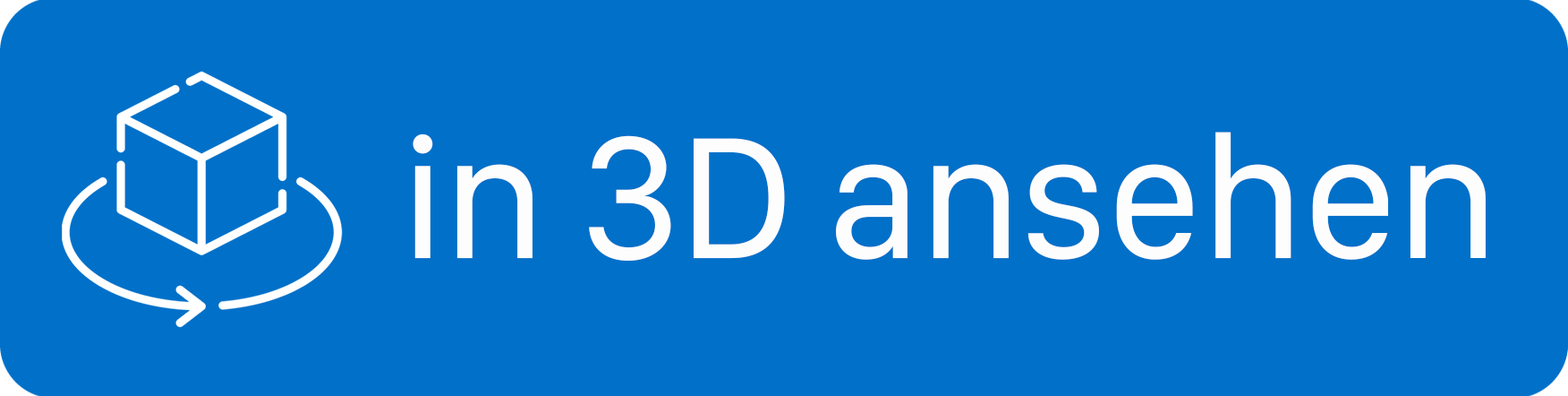
<style>
.page{position:relative;width:1568px;height:396px;background:#0070c9}
.page>*{position:absolute;margin:0}
.t1{font:179px "SFCompactDisplay-Regular";color:#fdfdfd}
</style>
<div class="page">
<p class="t1" style="left:413px;top:132px;width:1073px;height:128px">in 3D ansehen</p>
</div>
